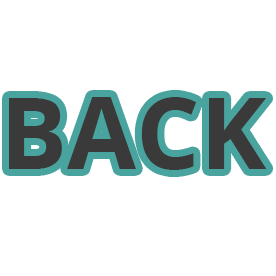
<style>
.page{position:relative;width:276px;height:276px;background:#ffffff}
.page>*{position:absolute;margin:0}
.t1{font:100px "OpenSans-Bold";color:#3a3a3a}
</style>
<div class="page">
<p class="t1" style="left:9px;top:97px;width:258px;height:73px">BACK</p>
</div>
